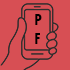
<style>
.page{position:relative;width:70px;height:70px;background:#d74f54}
.page>*{position:absolute;margin:0}
.t1{font:16px "TwCenMT-CondensedExtraBold";color:#000000}
</style>
<div class="page">
<p class="t1" style="left:35px;top:14px;width:7px;height:30px">P<br>F</p>
</div>
